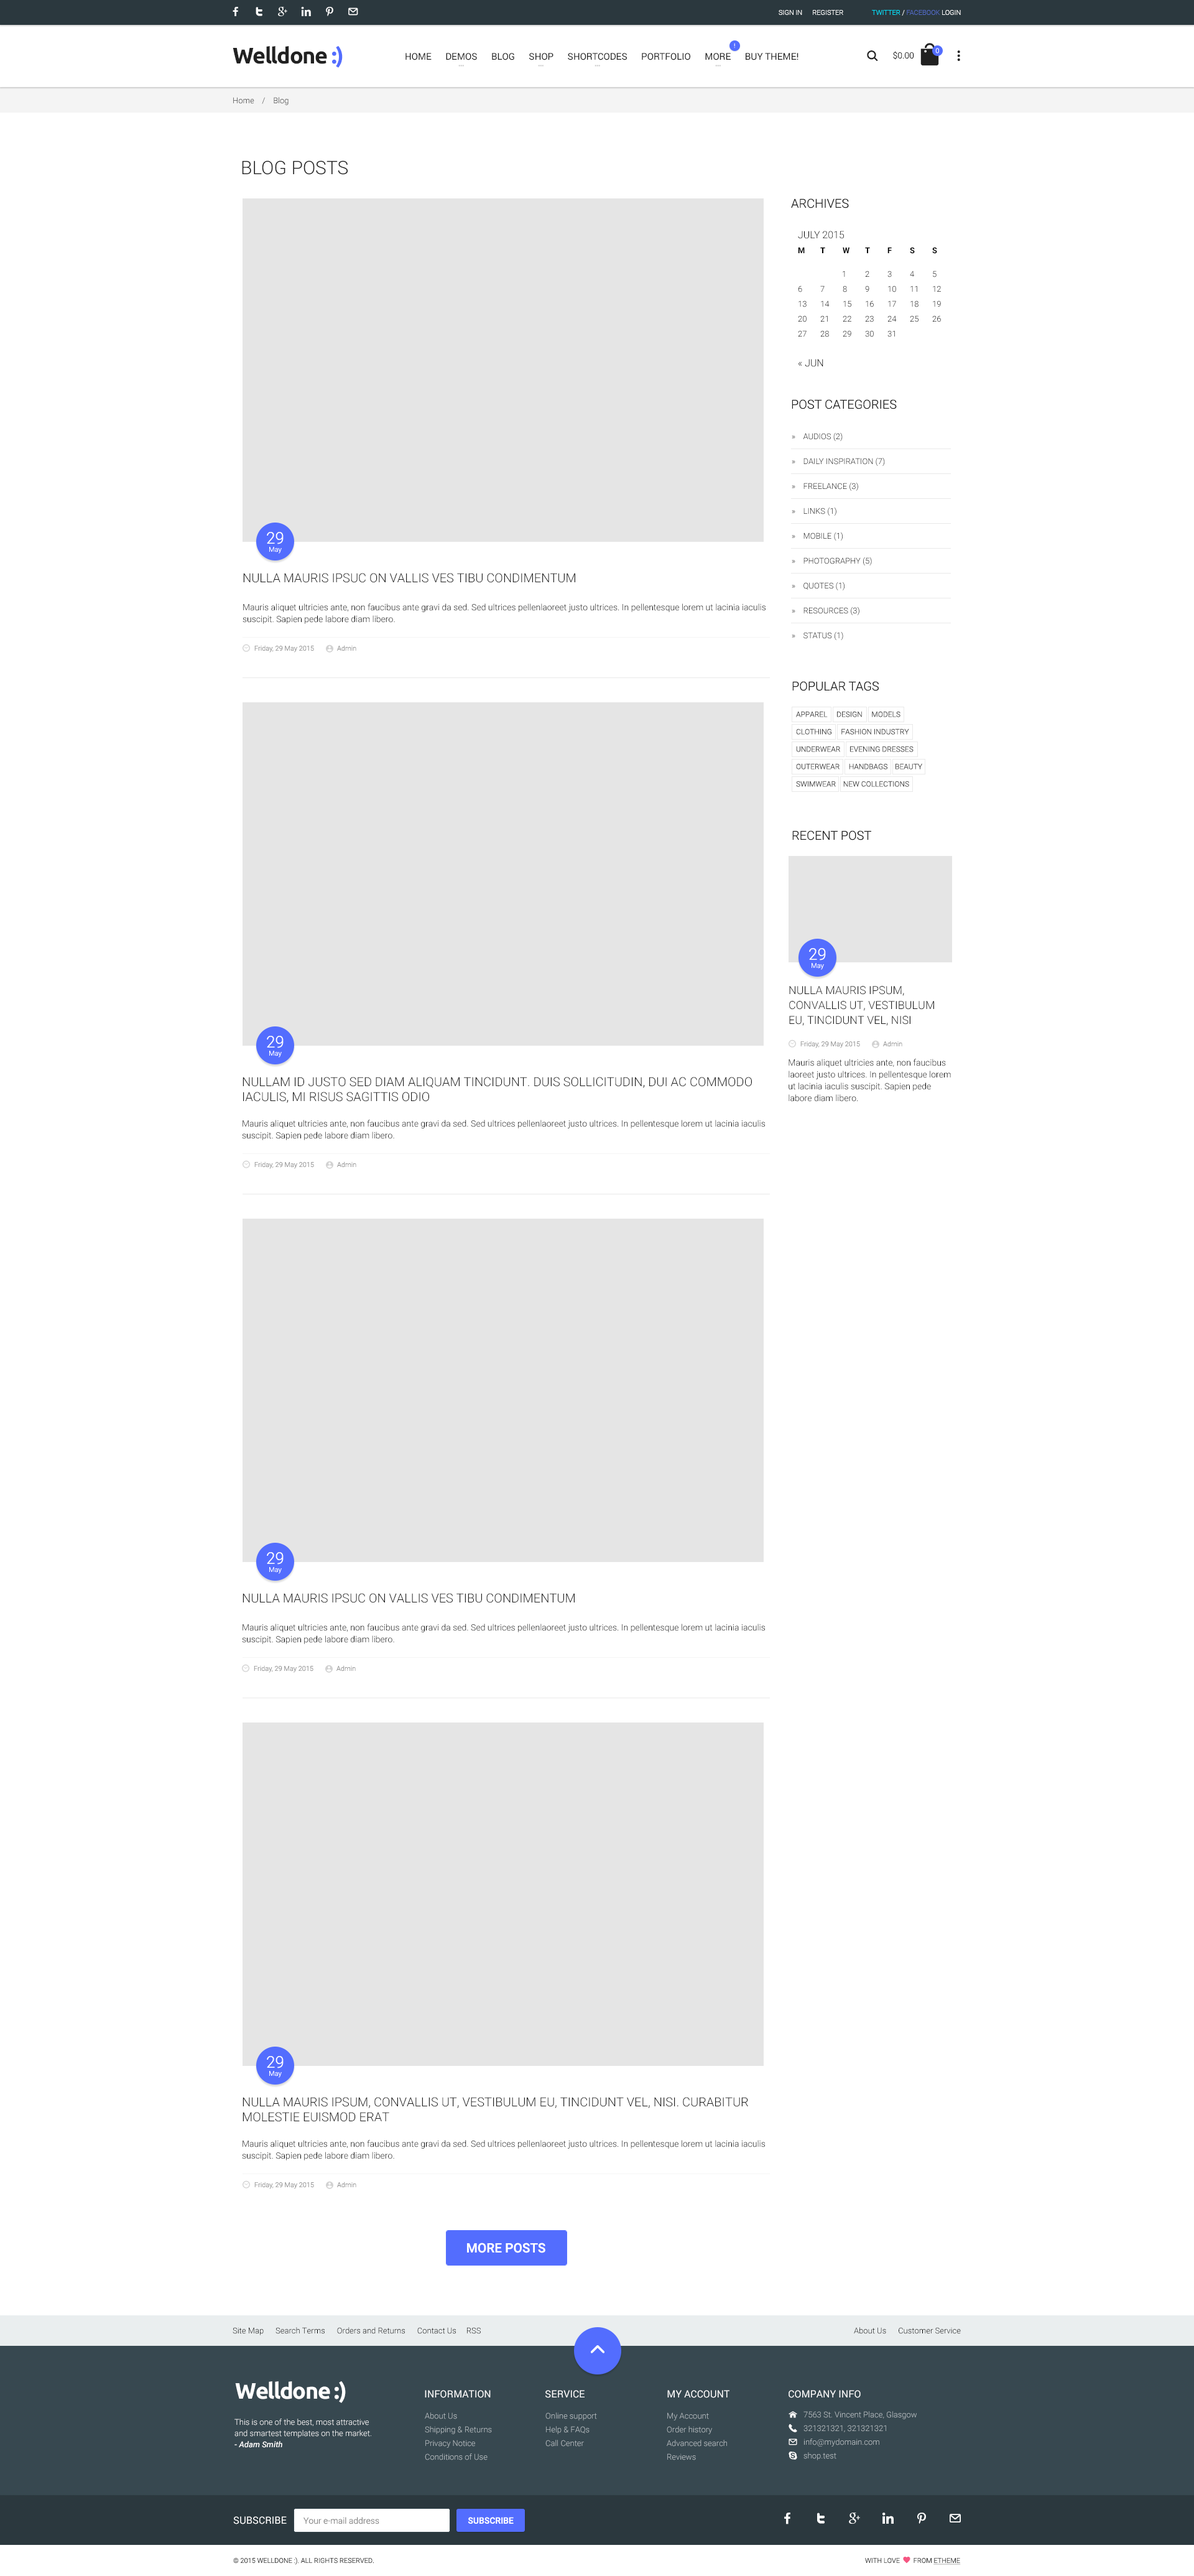
<style>
.page{position:relative;width:1194px;height:2576px;background:#ffffff}
.page>*{position:absolute;margin:0}
.t1{font:6.8px "Roboto-Light";color:#ffffff}
.t2{font:6.8px "Roboto-Light";color:#526ac4}
.t3{font:6.8px "Roboto-Light";color:#00e4ff}
.t4{font:22.4px "Ubuntu-Bold";letter-spacing:-0.04em;color:#212121}
.t5{font:22.4px "Ubuntu-Bold";letter-spacing:-0.04em;color:#536dfe}
.t6{font:9.3px "Roboto-Regular";color:#212121}
.t7{font:6.2px "Roboto-Regular"}
.t8{font:8.7px "Roboto-Light";color:#212121}
.t9{font:8.1px "Roboto-Light"}
.t10{font:18.7px "Roboto-Light";color:#212121;text-transform:uppercase}
.t11{font:12.4px "Roboto-Light";color:#212121;text-transform:uppercase}
.t12{font:8.1px/14.9px "Roboto-Light";color:#000000}
.t13{font:10px/14.9px "Roboto-Light";color:#000000}
.t14{font:8.1px/14.9px "Roboto-Bold";color:#000000}
.t15{font:8.1px/8.7px "Roboto-Light";color:#000000}
.t16{font:8.1px/24.9px "Roboto-Light";color:#000000;text-transform:uppercase}
.t17{font:6.8px/8.1px "Roboto-Light";color:#ffffff}
.t18{font:16.2px/8.1px "Roboto-Light";color:#ffffff}
.t19{font:8.7px/11.8px "Roboto-Light";color:#000000}
.t20{font:6.8px "Roboto-Light";color:#919191}
.t21{font:7.5px/17.4px "Roboto-Light";color:#3f3f3f;text-transform:uppercase}
.t22{font:11.2px/14.9px "Roboto-Light";color:#212121;text-transform:uppercase}
.t23{font:12.4px/14.9px "Roboto-Light";color:#212121;text-transform:uppercase}
.t24{font:13px "Roboto-Medium";color:#ffffff;text-transform:uppercase}
.t25{font:8.1px "Roboto-Light";color:#000000}
.t26{font:22.4px "Ubuntu-Bold";letter-spacing:-0.04em;color:#ffffff}
.t27{font:10px "Roboto-Regular";color:#ffffff;text-transform:uppercase}
.t28{font:8.1px/13.7px "Roboto-Light";color:#bbc2c6}
.t29{font:8.1px/11.2px "Roboto-Light";color:#ffffff}
.t30{font:8.1px/11.2px "Roboto-MediumItalic";color:#ffffff}
.t31{font:8.7px "Roboto-Light";color:#848484}
.t32{font:8.7px "Roboto-Medium";color:#ffffff;text-transform:uppercase}
.t33{font:6.8px "Roboto-Light";color:#2b2b2b;text-transform:uppercase}
</style>
<div class="page">
<p class="t1" style="left:779px;top:10px;width:65px;height:5px">SIGN IN      REGISTER</p>
<p class="t2" style="left:872px;top:10px;width:89px;height:6px"><span class="t3">TWITTER </span><span class="t1">/ </span>FACEBOOK <span class="t1">LOGIN</span></p>
<p class="t4" style="left:233px;top:45px;width:110px;height:23px">Welldone <span class="t5">:)</span></p>
<p class="t6" style="left:406px;top:53px;width:393px;height:7px">HOME      DEMOS      BLOG      SHOP      SHORTCODES      PORTFOLIO      MORE      BUY THEME!</p>
<p class="t7" style="left:734px;top:43px;width:1px;height:5px">!</p>
<p class="t8" style="left:893px;top:51px;width:21px;height:9px">$0.00</p>
<p class="t1" style="left:936px;top:48px;width:3px;height:5px">0</p>
<p class="t9" style="left:233px;top:97px;width:56px;height:8px">Home    /    Blog</p>
<p class="t10" style="left:242px;top:160px;width:106px;height:15px">Blog Posts</p>
<p class="t11" style="left:791px;top:198px;width:58px;height:10px">Archives</p>
<p class="t12" style="left:798px;top:231px;width:143px;height:136px"><span class="t13">JULY 2015<br></span><span class="t14">M T W T F S S<br> <br></span><span class="t15">             1 2 3 4 5<br></span>6 7 8 9 10 11 12<br>13 14 15 16 17 18 19<br>20 21 22 23 24 25 26<br>27 28 29 30 31  <br><br><span class="t13">« JUN</span></p>
<p class="t11" style="left:792px;top:399px;width:105px;height:10px">Post Categories</p>
<p class="t16" style="left:792px;top:432px;width:93px;height:208px">»    Audios (2)<br>»    Daily Inspiration (7)<br>»    Freelance (3)<br>»    Links (1)<br>»    Mobile (1)<br>»    Photography (5)<br>»    Quotes (1)<br>»    Resources (3)<br>»    Status (1)</p>
<p class="t17" style="left:267px;top:532px;width:17px;height:22px;text-align:center"><span class="t18">29<br></span>May</p>
<p class="t11" style="left:243px;top:573px;width:332px;height:10px">Nulla mauris ipsuc on vallis ves tibu condimentum</p>
<p class="t19" style="left:243px;top:603px;width:523px;height:21px">Mauris aliquet ultricies ante, non faucibus ante gravi da sed. Sed ultrices pellenlaoreet justo ultrices. In pellentesque lorem ut lacinia iaculis suscipit. Sapien pede labore diam libero.</p>
<p class="t20" style="left:254px;top:645px;width:60px;height:8px">Friday, 29 May 2015</p>
<p class="t20" style="left:337px;top:645px;width:19px;height:6px">Admin</p>
<p class="t11" style="left:793px;top:681px;width:86px;height:10px">Popular tags</p>
<p class="t21" style="left:796px;top:711px;width:127px;height:76px">Apparel     Design     Models     <br>Clothing     Fashion industry    <br>Underwear     Evening dresses<br>Outerwear     Handbags    beauty    swimwear    New collections</p>
<p class="t11" style="left:793px;top:830px;width:79px;height:10px">Recent Post</p>
<p class="t17" style="left:809px;top:948px;width:17px;height:22px;text-align:center"><span class="t18">29<br></span>May</p>
<p class="t22" style="left:789px;top:986px;width:145px;height:40px">Nulla mauris ipsum, <br>convallis ut, vestibulum eu, tincidunt vel, nisi</p>
<p class="t17" style="left:267px;top:1036px;width:17px;height:22px;text-align:center"><span class="t18">29<br></span>May</p>
<p class="t20" style="left:801px;top:1041px;width:59px;height:7px">Friday, 29 May 2015</p>
<p class="t20" style="left:883px;top:1041px;width:20px;height:6px">Admin</p>
<p class="t19" style="left:789px;top:1059px;width:162px;height:43px">Mauris aliquet ultricies ante, non faucibus laoreet justo ultrices. In pellentesque lorem ut lacinia iaculis suscipit. Sapien pede labore diam libero.</p>
<p class="t23" style="left:243px;top:1077px;width:509px;height:26px">Nullam id justo sed diam aliquam tincidunt. Duis sollicitudin, dui ac commodo iaculis, mi risus sagittis odio</p>
<p class="t19" style="left:242px;top:1120px;width:523px;height:20px">Mauris aliquet ultricies ante, non faucibus ante gravi da sed. Sed ultrices pellenlaoreet justo ultrices. In pellentesque lorem ut lacinia iaculis suscipit. Sapien pede labore diam libero.</p>
<p class="t20" style="left:254px;top:1161px;width:60px;height:8px">Friday, 29 May 2015</p>
<p class="t20" style="left:337px;top:1161px;width:19px;height:7px">Admin</p>
<p class="t17" style="left:267px;top:1552px;width:17px;height:22px;text-align:center"><span class="t18">29<br></span>May</p>
<p class="t11" style="left:243px;top:1593px;width:332px;height:10px">Nulla mauris ipsuc on vallis ves tibu condimentum</p>
<p class="t19" style="left:242px;top:1624px;width:523px;height:20px">Mauris aliquet ultricies ante, non faucibus ante gravi da sed. Sed ultrices pellenlaoreet justo ultrices. In pellentesque lorem ut lacinia iaculis suscipit. Sapien pede labore diam libero.</p>
<p class="t20" style="left:254px;top:1665px;width:60px;height:8px">Friday, 29 May 2015</p>
<p class="t20" style="left:337px;top:1665px;width:19px;height:7px">Admin</p>
<p class="t17" style="left:267px;top:2056px;width:17px;height:22px;text-align:center"><span class="t18">29<br></span>May</p>
<p class="t23" style="left:243px;top:2097px;width:505px;height:25px">Nulla mauris ipsum, convallis ut, vestibulum eu, tincidunt vel, nisi. Curabitur molestie euismod erat</p>
<p class="t19" style="left:242px;top:2140px;width:523px;height:20px">Mauris aliquet ultricies ante, non faucibus ante gravi da sed. Sed ultrices pellenlaoreet justo ultrices. In pellentesque lorem ut lacinia iaculis suscipit. Sapien pede labore diam libero.</p>
<p class="t20" style="left:254px;top:2182px;width:60px;height:7px">Friday, 29 May 2015</p>
<p class="t20" style="left:337px;top:2182px;width:19px;height:6px">Admin</p>
<p class="t24" style="left:467px;top:2243px;width:79px;height:10px">more posts</p>
<p class="t25" style="left:233px;top:2327px;width:248px;height:8px">Site Map      Search Terms      Orders and Returns      Contact Us     RSS</p>
<p class="t25" style="left:854px;top:2327px;width:107px;height:7px">About Us      Customer Service</p>
<p class="t26" style="left:235px;top:2381px;width:111px;height:22px">Welldone :)</p>
<p class="t27" style="left:425px;top:2390px;width:66px;height:8px">Information</p>
<p class="t27" style="left:546px;top:2390px;width:39px;height:8px">service</p>
<p class="t27" style="left:667px;top:2390px;width:63px;height:8px">My account</p>
<p class="t27" style="left:789px;top:2390px;width:72px;height:8px">Company Info</p>
<p class="t28" style="left:425px;top:2412px;width:67px;height:48px">About Us<br>Shipping &amp; Returns<br>Privacy Notice<br>Conditions of Use</p>
<p class="t28" style="left:546px;top:2412px;width:51px;height:35px">Online support<br>Help &amp; FAQs<br>Call Center</p>
<p class="t28" style="left:667px;top:2412px;width:60px;height:48px">My Account<br>Order history<br>Advanced search<br>Reviews</p>
<p class="t28" style="left:804px;top:2411px;width:113px;height:49px">7563 St. Vincent Place, Glasgow<br>321321321, 321321321<br>info@mydomain.com<br>shop.test</p>
<p class="t29" style="left:235px;top:2419px;width:136px;height:29px">This is one of the best, most attractive and smartest templates on the market. <br><span class="t30">- Adam Smith</span></p>
<p class="t27" style="left:233px;top:2516px;width:54px;height:8px">Subscribe</p>
<p class="t31" style="left:304px;top:2517px;width:75px;height:7px">Your e-mail address</p>
<p class="t32" style="left:468px;top:2517px;width:46px;height:7px">SUBSCRIBE</p>
<p class="t33" style="left:233px;top:2557px;width:141px;height:8px">© 2015 Welldone :). All Rights Reserved.</p>
</div>
